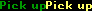
<style>
.page{position:relative;width:92px;height:11px;background:#000000}
.page>*{position:absolute;margin:0}
.t1{font:13.2px "Onesize";color:#009900;scale:0.91 1}
.t2{font:13.2px "Onesize";color:#ffff66;scale:0.91 1}
</style>
<div class="page">
<p class="t1" style="left:0px;top:1px;width:46px;height:10px">Pick up</p>
<p class="t2" style="left:46px;top:1px;width:46px;height:10px">Pick up</p>
</div>
